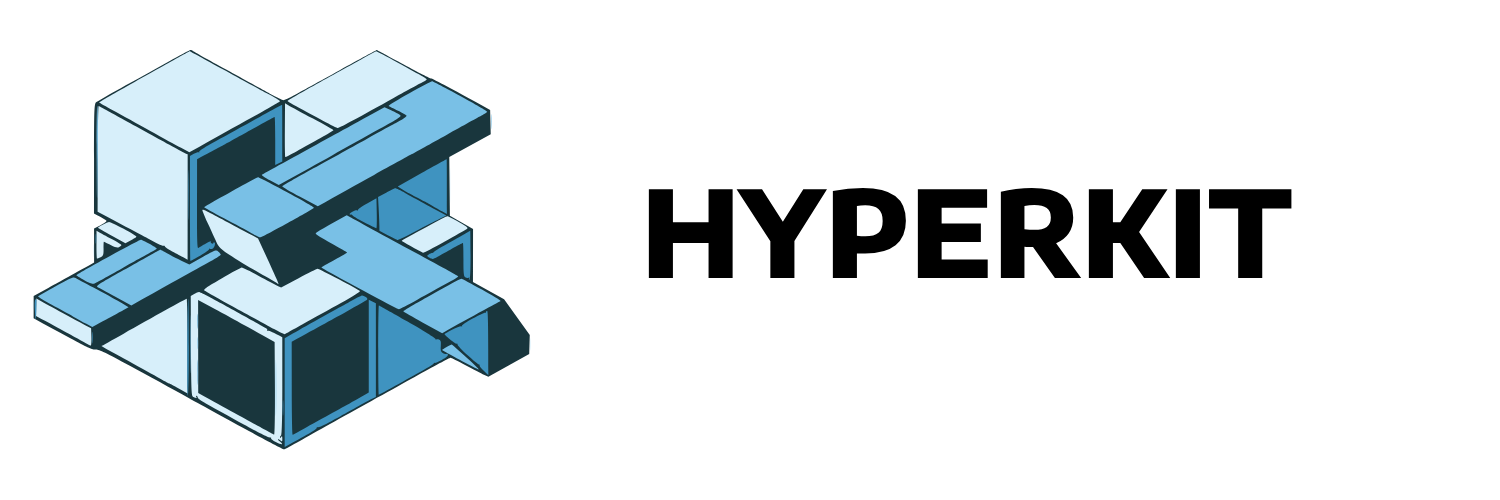
<style>
.page{position:relative;width:1500px;height:500px;background:#ffffff}
.page>*{position:absolute;margin:0}
.t1{font:120px "EncodeSansSemiExpanded-ExtraBold";color:#000000}
</style>
<div class="page">
<p class="t1" style="left:648px;top:188px;width:644px;height:90px">HYPERKIT</p>
</div>
